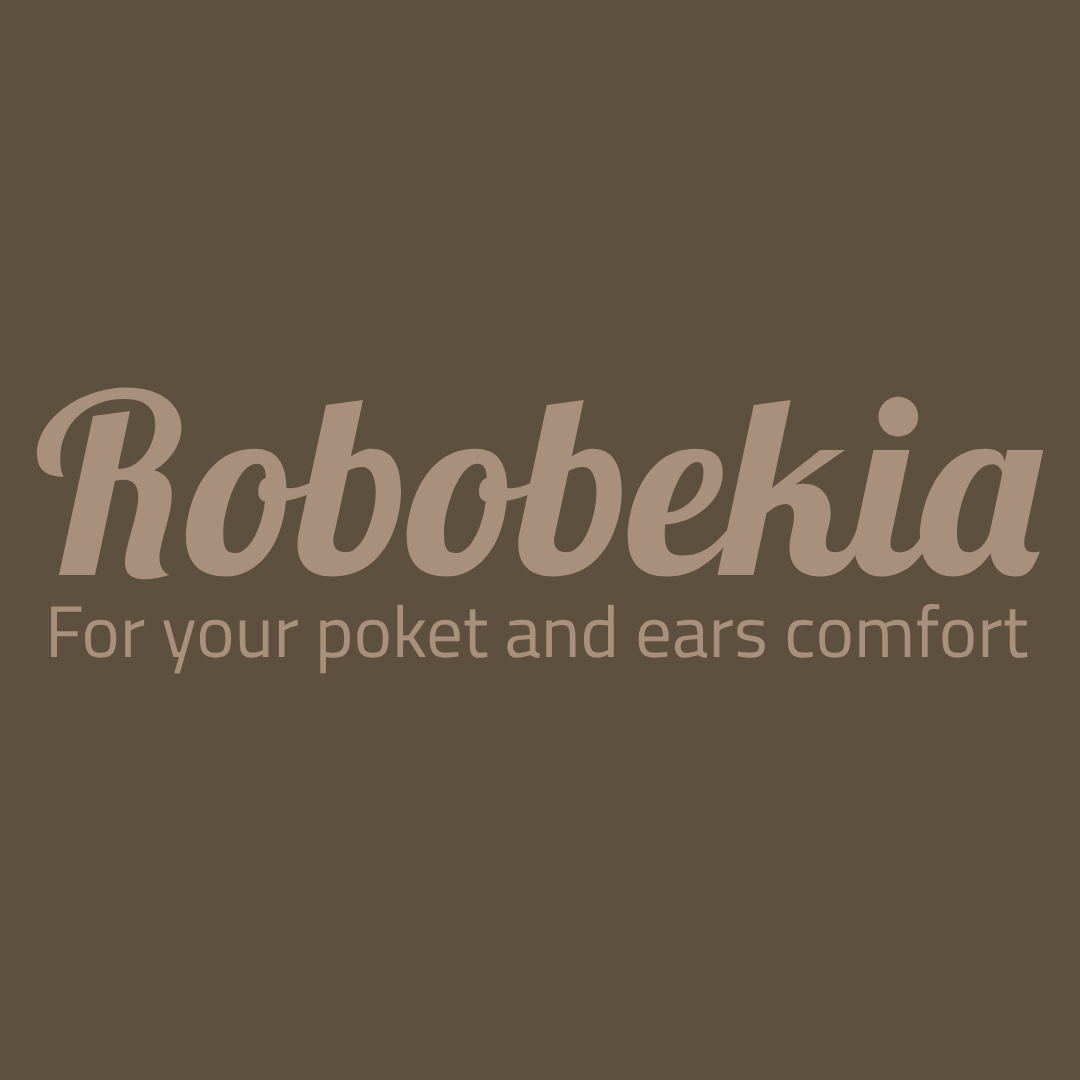
<style>
.page{position:relative;width:1080px;height:1080px;background:#5e503f}
.page>*{position:absolute;margin:0}
.t1{font:250px "LobsterTwo-BoldItalic";color:#a9907d}
.t2{font:73px "Cairo-Regular";color:#a9907d}
</style>
<div class="page">
<p class="t1" style="left:36px;top:387px;width:1008px;height:193px">Robobekia</p>
<p class="t2" style="left:51px;top:603px;width:977px;height:71px">For your poket and ears comfort</p>
</div>
